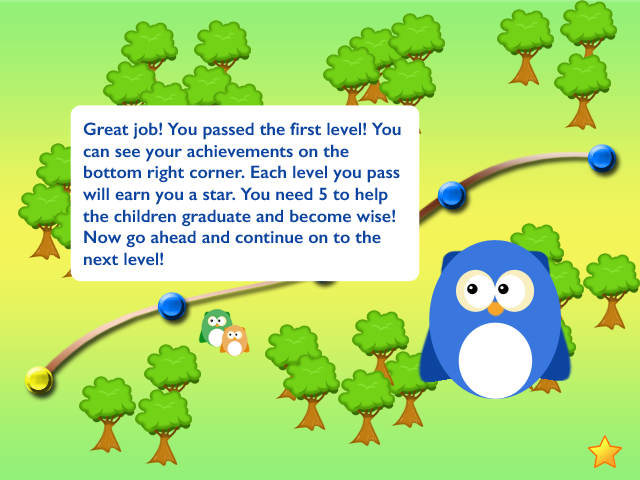
<style>
.page{position:relative;width:640px;height:480px}
.page>*{position:absolute;margin:0}
.t1{font:18px "GillSans-SemiBold";color:#0c449f}
</style>
<div class="page">
<p class="t1" style="left:83px;top:122px;width:318px;height:144px">Great job! You passed the first level! You can see your achievements on the bottom right corner. Each level you pass will earn you a star. You need 5 to help the children graduate and become wise! Now go ahead and continue on to the next level!</p>
</div>
